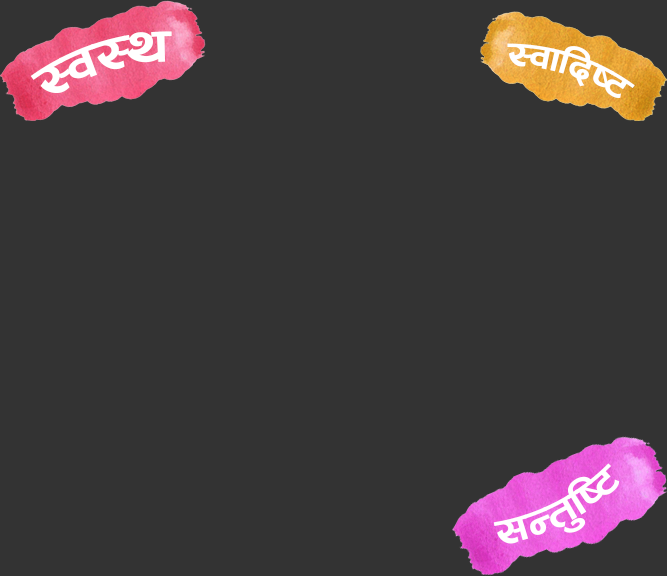
<style>
.page{position:relative;width:667px;height:576px;background:#333333}
.page>*{position:absolute;margin:0}
.t1{font:64px "0001ARAPBK";letter-spacing:-0.01em;color:#ffffff}
.t2{font:46px "0001ARAPBK";letter-spacing:-0.01em;color:#ffffff}
.t3{font:50px "0001ARAPBK";letter-spacing:-0.01em;color:#ffffff}
</style>
<div class="page">
<p class="t1" style="left:30px;top:31px;width:142px;height:62px;rotate:-18deg">:j:y</p>
<p class="t2" style="left:507px;top:43px;width:128px;height:55px;rotate:18deg">:jflbi6</p>
<p class="t3" style="left:493px;top:463px;width:127px;height:81px;rotate:-27deg">;Gt'li6</p>
</div>
